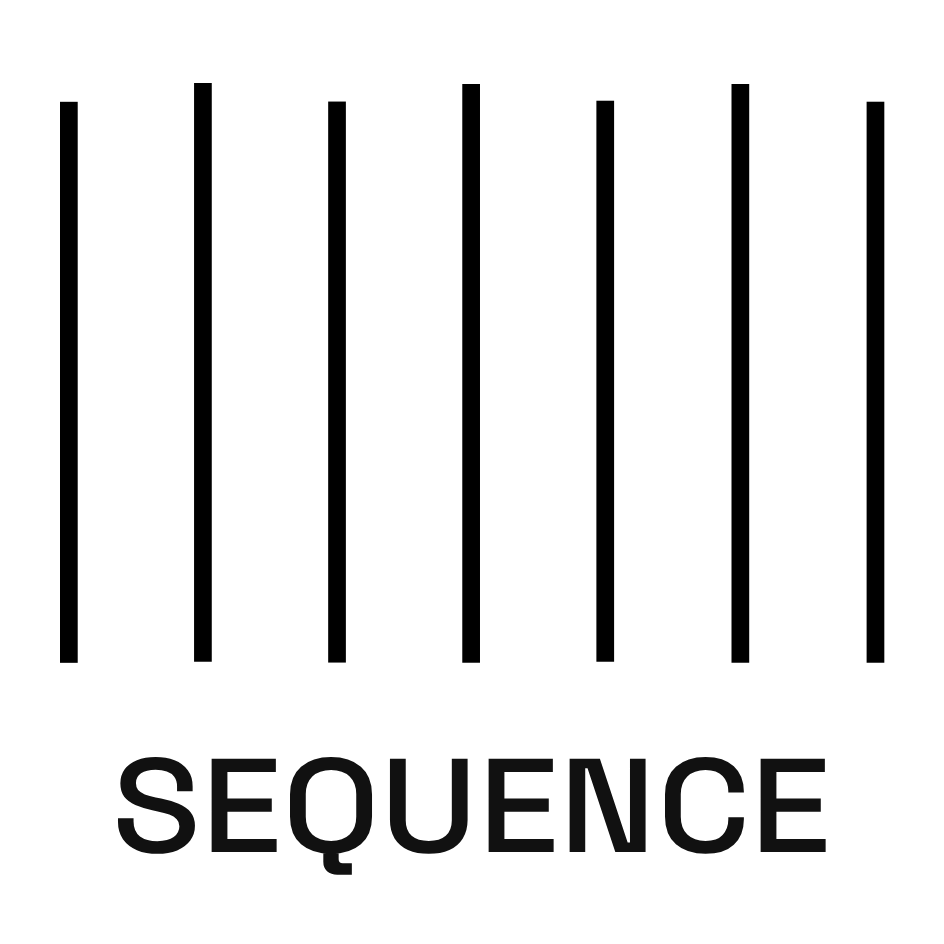
<style>
.page{position:relative;width:944px;height:944px;background:#ffffff}
.page>*{position:absolute;margin:0}
.t1{font:133px "SpaceGroteskLight-Medium";color:#111111;scale:1.1 1}
</style>
<div class="page">
<p class="t1" style="left:117px;top:757px;width:709px;height:118px">SEQUENCE</p>
</div>
